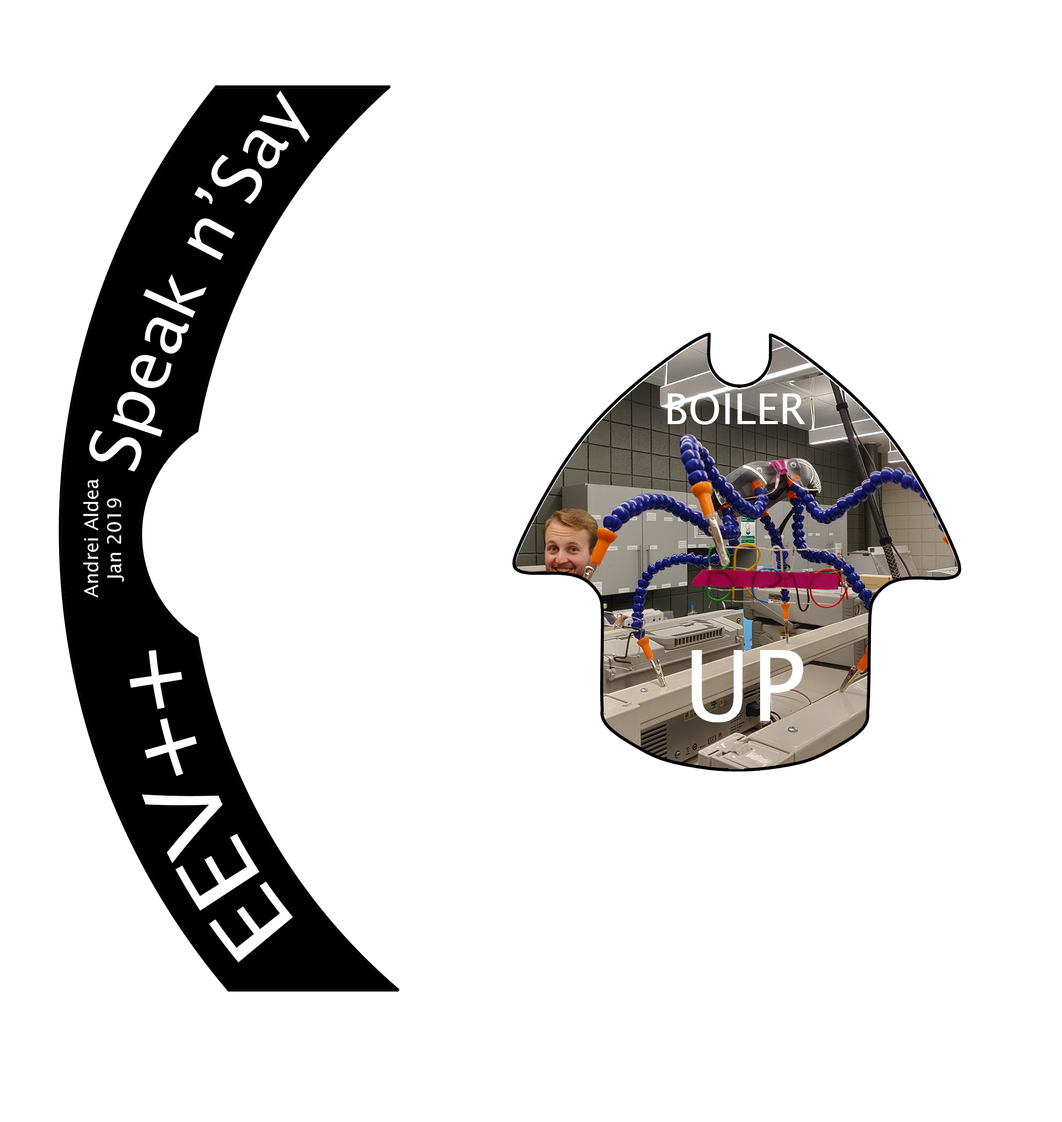
<style>
.page{position:relative;width:1062px;height:1122px;background:#ffffff}
.page>*{position:absolute;margin:0}
.t1{font:42.5px "LucidaSans";color:#ffffff}
.t2{font:19.1px "LucidaSans";color:#ffffff}
.t3{font:97.6px "LucidaSans";color:#ffffff}
</style>
<div class="page">
<p class="t1" style="left:668px;top:393px;width:138px;height:32px">BOILER</p>
<p class="t2" style="left:83px;top:479px;width:41px;height:119px;text-align:center;rotate:-90deg">Andrei Aldea<br>Jan 2019</p>
<p class="t3" style="left:129px;top:650px;width:164px;height:313px;rotate:-113deg">EEV++</p>
<p class="t3" style="left:692px;top:650px;width:112px;height:73px">UP</p>
</div>
